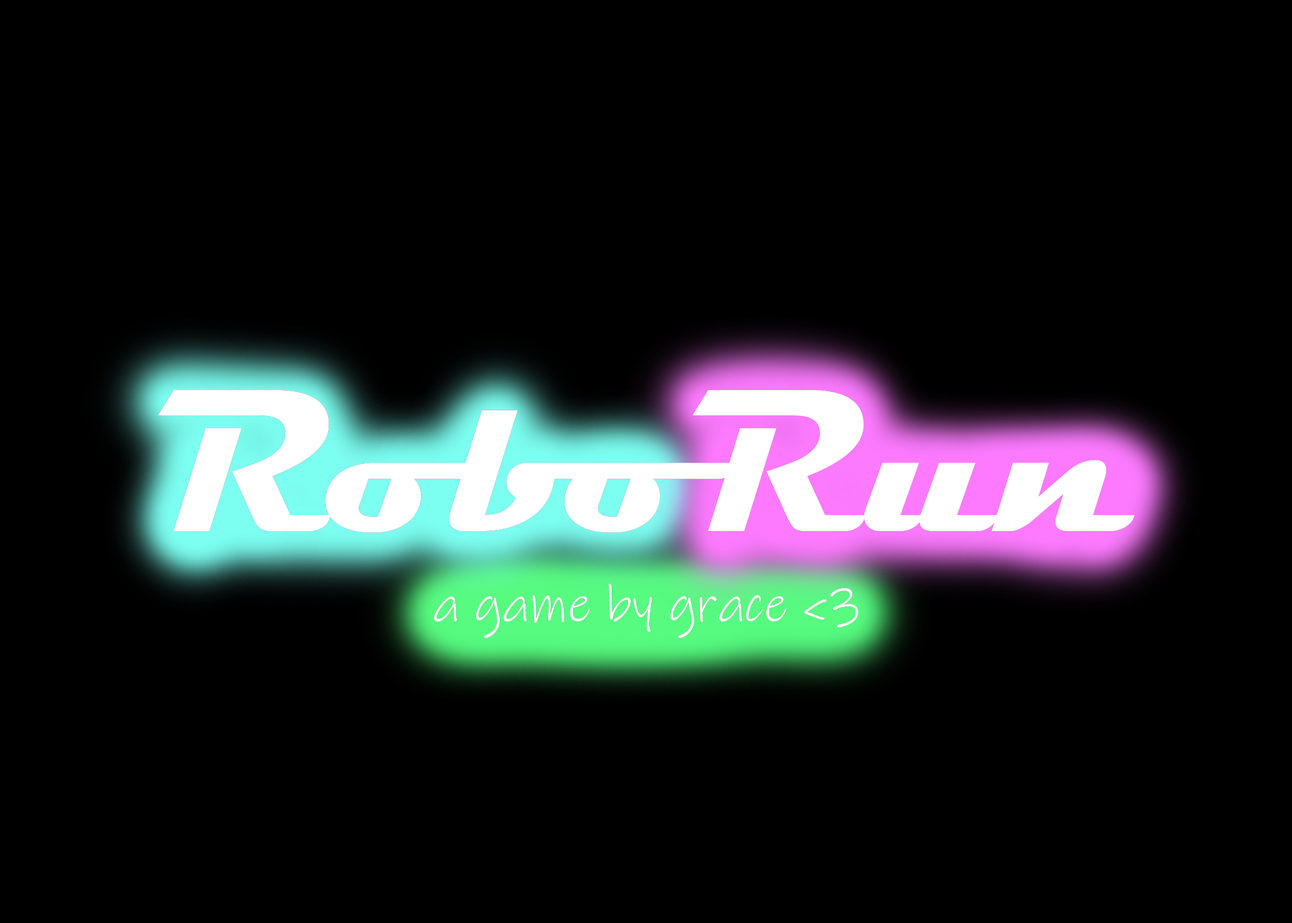
<style>
.page{position:relative;width:1292px;height:923px;background:#000000}
.page>*{position:absolute;margin:0}
.t1{font:205.1px "Magneto-Bold";color:#ffffff}
.t2{font:205.1px "Magneto-Bold";color:#404040}
.t3{font:51.3px "InkFree";color:#ffffff}
</style>
<div class="page">
<p class="t1" style="left:158px;top:390px;width:977px;height:143px">RoboRun</p>
<p class="t1" style="left:158px;top:390px;width:977px;height:143px">Robo<span class="t2">Run</span></p>
<p class="t2" style="left:158px;top:390px;width:977px;height:143px">Robo<span class="t1">Run</span></p>
<p class="t1" style="left:158px;top:390px;width:977px;height:143px">RoboRun</p>
<p class="t3" style="left:434px;top:583px;width:424px;height:55px">a game by grace &lt;3</p>
<p class="t3" style="left:434px;top:583px;width:424px;height:55px">a game by grace &lt;3</p>
</div>
